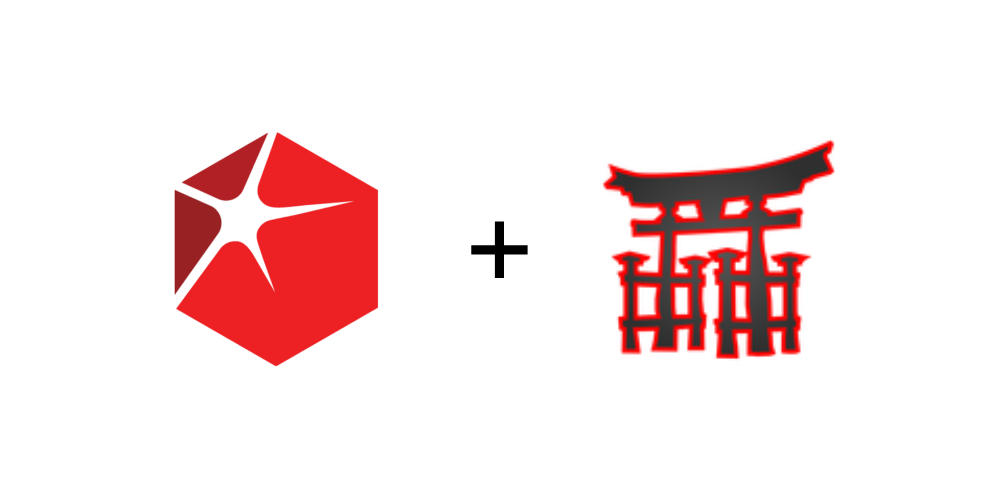
<style>
.page{position:relative;width:1000px;height:500px;background:#ffffff}
.page>*{position:absolute;margin:0}
.t1{font:125px "DroidSansMono";color:#000000}
</style>
<div class="page">
<p class="t1" style="left:471px;top:221px;width:57px;height:58px">+</p>
</div>
